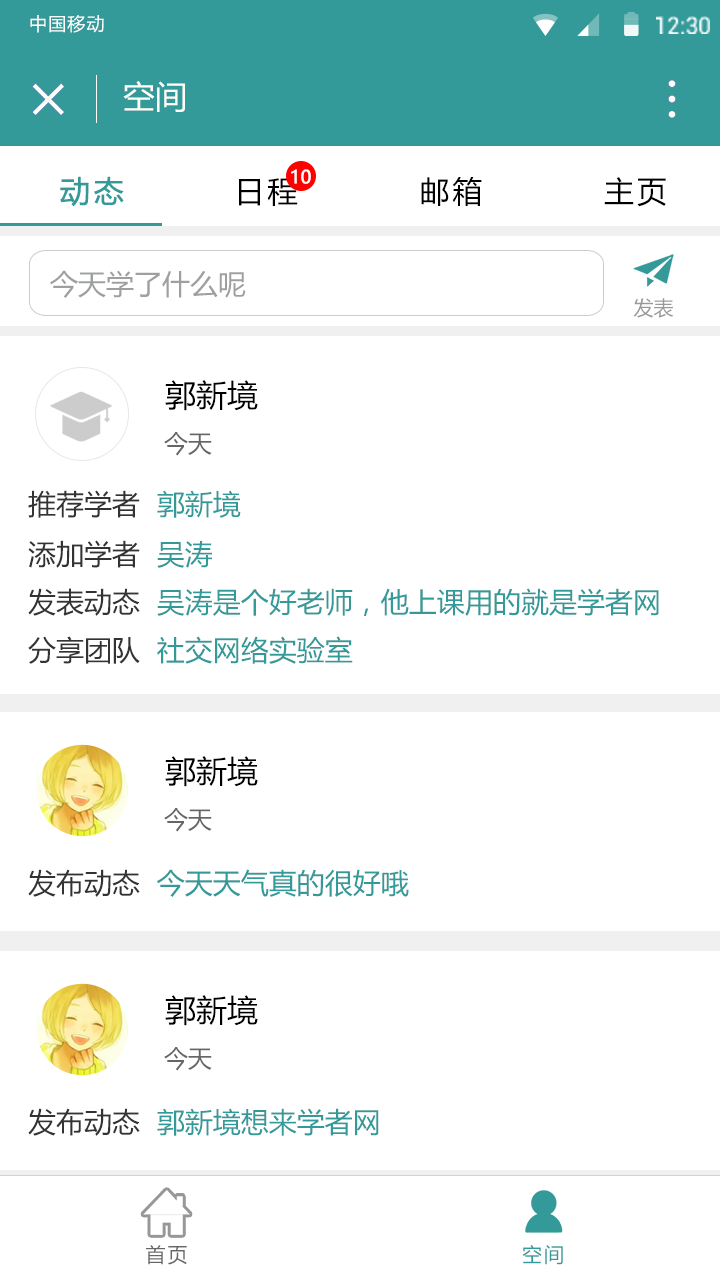
<style>
.page{position:relative;width:720px;height:1280px;background:#ffffff}
.page>*{position:absolute;margin:0}
.t1{font:17.9px "MicrosoftYaHei";letter-spacing:0.065em;color:#ffffff}
.t2{font:32px "MicrosoftYaHei";color:#fefdf8}
.t3{font:18px "MicrosoftYaHei";color:#ffffff;font-weight:bold}
.t4{font:30px "MicrosoftYaHei";letter-spacing:0.1em;color:#000000}
.t5{font:30px "MicrosoftYaHei";letter-spacing:0.1em;color:#339999;font-weight:bold}
.t6{font:28px "MicrosoftYaHei";color:#9e9f9f}
.t7{font:20px "MicrosoftYaHei";color:#999999}
.t8{font:31px "MicrosoftYaHei";color:#000000}
.t9{font:24px "MicrosoftYaHei";color:#666666}
.t10{font:28px "MicrosoftYaHei";color:#333333}
.t11{font:28px "MicrosoftYaHei";color:#339999}
.t12{font:20px "MicrosoftYaHei";letter-spacing:0.1em;color:#666666}
.t13{font:20px "MicrosoftYaHei";letter-spacing:0.1em;color:#339999}
</style>
<div class="page">
<p class="t1" style="left:30px;top:15px;width:74px;height:18px">中国移动</p>
<p class="t2" style="left:123px;top:81px;width:62px;height:31px">空间</p>
<p class="t3" style="left:291px;top:169px;width:20px;height:15px">10</p>
<p class="t4" style="left:60px;top:176px;width:606px;height:31px"><span class="t5">动态</span>         日程          邮箱          主页</p>
<p class="t6" style="left:50px;top:270px;width:196px;height:28px">今天学了什么呢</p>
<p class="t7" style="left:633px;top:298px;width:41px;height:20px">发表</p>
<p class="t8" style="left:165px;top:380px;width:93px;height:31px">郭新境</p>
<p class="t9" style="left:164px;top:432px;width:48px;height:24px">今天</p>
<p class="t10" style="left:28px;top:490px;width:213px;height:28px">推荐学者  <span class="t11">郭新境</span></p>
<p class="t10" style="left:28px;top:540px;width:184px;height:28px">添加学者  <span class="t11">吴涛</span></p>
<p class="t11" style="left:28px;top:588px;width:631px;height:28px"><span class="t10">发表动态  </span>吴涛是个好老师，他上课用的就是学者网</p>
<p class="t11" style="left:28px;top:636px;width:325px;height:28px"><span class="t10">分享团队  </span>社交网络实验室</p>
<p class="t8" style="left:165px;top:756px;width:93px;height:31px">郭新境</p>
<p class="t9" style="left:164px;top:808px;width:48px;height:24px">今天</p>
<p class="t11" style="left:28px;top:869px;width:381px;height:28px"><span class="t10">发布动态  </span>今天天气真的很好哦</p>
<p class="t8" style="left:165px;top:995px;width:93px;height:31px">郭新境</p>
<p class="t9" style="left:164px;top:1047px;width:48px;height:24px">今天</p>
<p class="t11" style="left:28px;top:1108px;width:351px;height:28px"><span class="t10">发布动态  </span>郭新境想来学者网</p>
<p class="t12" style="left:146px;top:1245px;width:417px;height:20px">首页                                          <span class="t13">空间</span></p>
</div>
